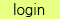
<style>
.page{position:relative;width:60px;height:19px;background:#e7ff83}
.page>*{position:absolute;margin:0}
.t1{font:14px "NanumGothic";color:#000000}
</style>
<div class="page">
<p class="t1" style="left:14px;top:3px;width:31px;height:14px">login</p>
</div>
